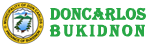
<style>
.page{position:relative;width:166px;height:46px;background:#ffffff}
.page>*{position:absolute;margin:0}
.t1{font:16.7px/16.7px "Algerian";color:#28a745;font-weight:bold}
.t2{font:16.7px/16.7px "Algerian";letter-spacing:0.12em;color:#28a745;font-weight:bold}
</style>
<div class="page">
<p class="t1" style="left:49px;top:7px;width:97px;height:30px">DonCarlos<br><span class="t2">Bukidnon</span></p>
</div>
